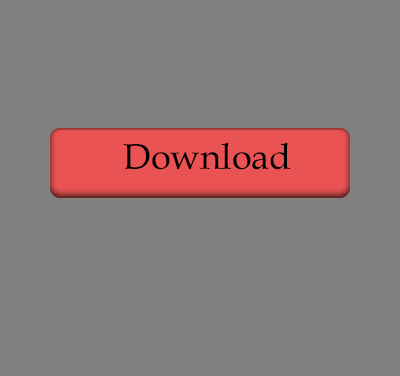
<style>
.page{position:relative;width:400px;height:376px;background:#808080}
.page>*{position:absolute;margin:0}
.t1{font:36px "BookAntiqua";color:#000000}
</style>
<div class="page">
<p class="t1" style="left:123px;top:142px;width:167px;height:28px">Download</p>
</div>
